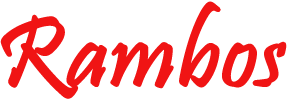
<style>
.page{position:relative;width:288px;height:100px;background:#ffffff}
.page>*{position:absolute;margin:0}
.t1{font:100px "Pristina-Regular";color:#f01414;font-weight:bold}
</style>
<div class="page">
<p class="t1" style="left:0px;top:1px;width:287px;height:98px">Rambos</p>
</div>
